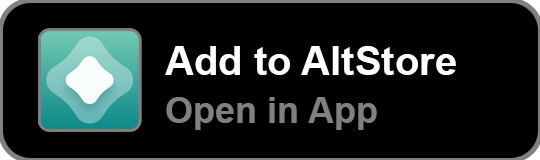
<style>
.page{position:relative;width:540px;height:160px;background:#000000}
.page>*{position:absolute;margin:0}
.t1{font:40px "Arial-BoldMT";color:#ffffff}
.t2{font:36px "Arial-BoldMT";color:#808080}
</style>
<div class="page">
<p class="t1" style="left:165px;top:46px;width:291px;height:29px">Add to AltStore</p>
<p class="t2" style="left:166px;top:97px;width:211px;height:33px">Open in App</p>
</div>
